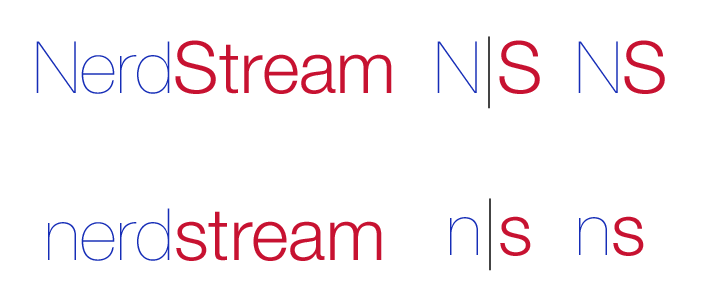
<style>
.page{position:relative;width:701px;height:307px;background:#ffffff}
.page>*{position:absolute;margin:0}
.t1{font:72px "HelveticaNeue-Light";color:#c71231}
.t2{font:72px "HelveticaNeue-UltraLight";color:#162db7}
.t3{font:72px "HelveticaNeue-UltraLight";color:#000000}
</style>
<div class="page">
<p class="t1" style="left:36px;top:40px;width:356px;height:54px"><span class="t2">Nerd</span>Stream</p>
<p class="t2" style="left:437px;top:36px;width:103px;height:73px">N<span class="t3">|</span><span class="t1">S</span></p>
<p class="t2" style="left:578px;top:40px;width:87px;height:54px">N<span class="t1">S</span></p>
<p class="t2" style="left:450px;top:198px;width:81px;height:73px">n<span class="t3">|</span><span class="t1">s</span></p>
<p class="t1" style="left:48px;top:208px;width:334px;height:53px"><span class="t2">nerd</span>stream</p>
<p class="t2" style="left:579px;top:216px;width:65px;height:40px">n<span class="t1">s</span></p>
</div>
